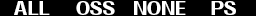
<style>
.page{position:relative;width:256px;height:16px;background:#000000}
.page>*{position:absolute;margin:0}
.t1{font:17px "FolkPro-Heavy";color:#ffffff}
</style>
<div class="page">
<p class="t1" style="left:14px;top:1px;width:36px;height:14px">ALL</p>
<p class="t1" style="left:76px;top:1px;width:39px;height:14px">OSS</p>
<p class="t1" style="left:134px;top:1px;width:52px;height:14px">NONE</p>
<p class="t1" style="left:211px;top:1px;width:25px;height:14px">PS</p>
</div>
